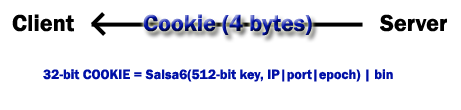
<style>
.page{position:relative;width:461px;height:110px;background:#ffffff}
.page>*{position:absolute;margin:0}
.t1{font:24px "FranklinGothic-Demi";color:#000000}
.t2{font:24px "FranklinGothic-Demi"}
.t3{font:14px "FranklinGothic-Demi";color:#0010a7}
</style>
<div class="page">
<p class="t1" style="left:12px;top:14px;width:62px;height:18px">Client</p>
<p class="t2" style="left:143px;top:14px;width:169px;height:22px">Cookie (4 bytes)</p>
<p class="t1" style="left:380px;top:14px;width:67px;height:18px">Server</p>
<p class="t3" style="left:43px;top:69px;width:350px;height:13px">32-bit COOKIE = Salsa6(512-bit key, IP|port|epoch) | bin</p>
</div>
